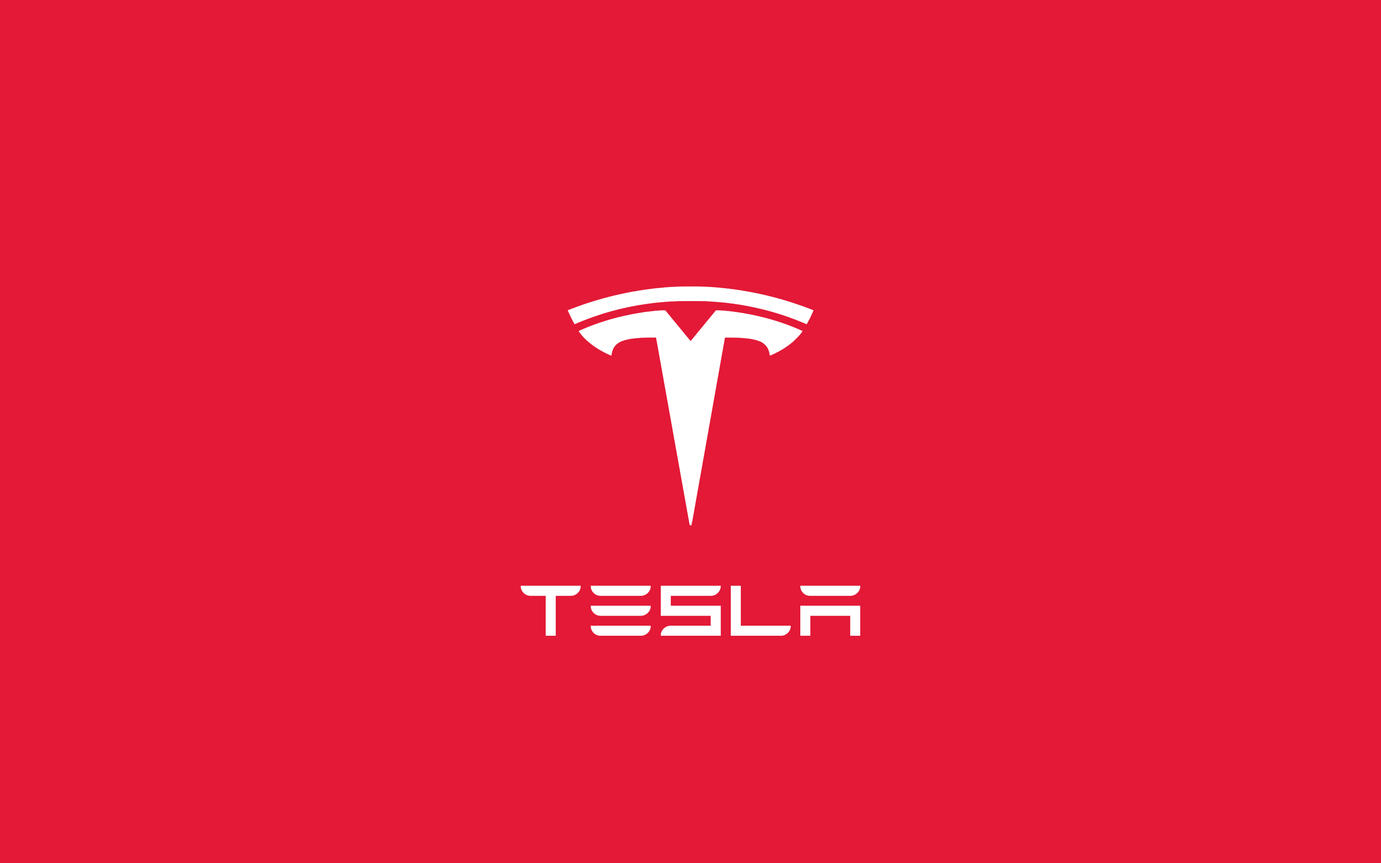
<style>
.page{position:relative;width:1381px;height:863px;background:#e31937}
.page>*{position:absolute;margin:0}
.t1{font:79.9px "TESLA";color:#ffffff}
</style>
<div class="page">
<p class="t1" style="left:521px;top:586px;width:339px;height:50px">TESLA</p>
</div>
